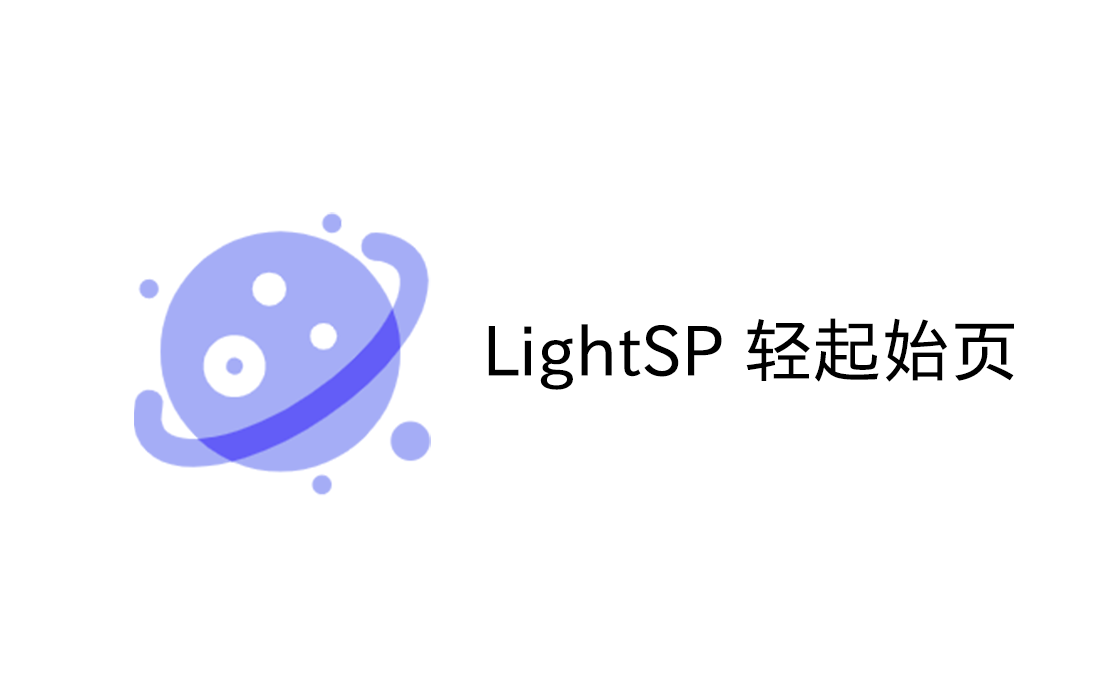
<style>
.page{position:relative;width:1120px;height:700px;background:#ffffff}
.page>*{position:absolute;margin:0}
.t1{font:69px "LXGWNeoXiHei";color:#000000}
</style>
<div class="page">
<p class="t1" style="left:488px;top:318px;width:526px;height:72px">LightSP 轻起始页</p>
</div>
